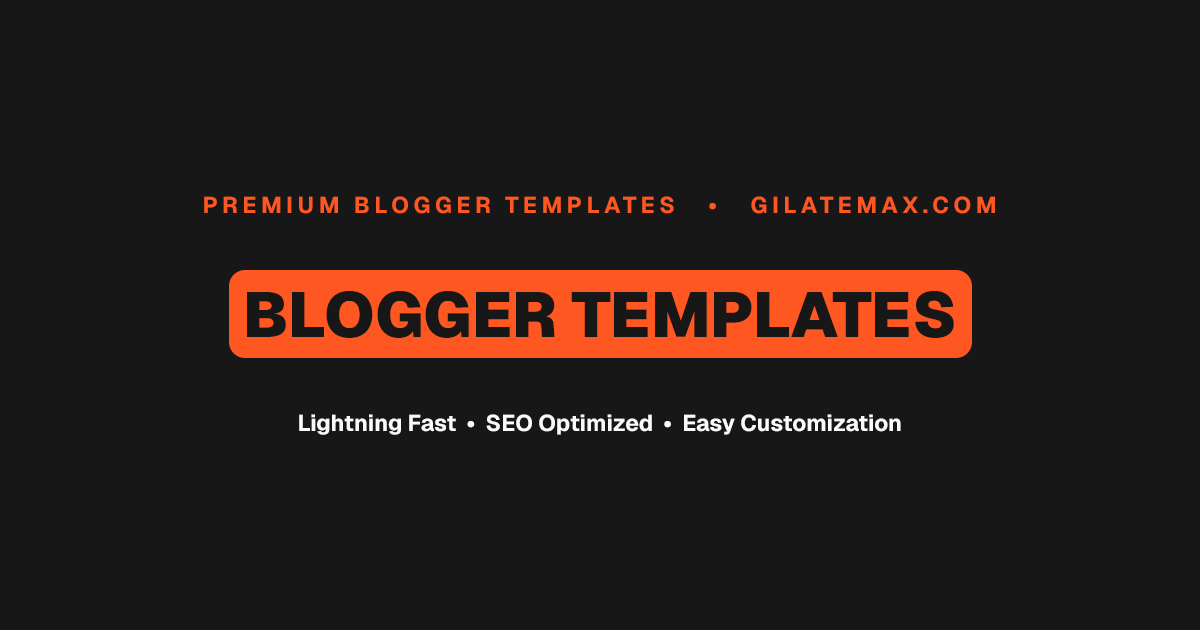
<style>
.page{position:relative;width:1200px;height:630px;background:#171717}
.page>*{position:absolute;margin:0}
.t1{font:22.8px "Geist-Bold";letter-spacing:0.2em;color:#ff5722}
.t2{font:63.5px "Geist-Black";color:#171717}
.t3{font:22.8px "Geist-Bold";color:#fafafa}
</style>
<div class="page">
<p class="t1" style="left:204px;top:196px;width:791px;height:18px">PREMIUM BLOGGER TEMPLATES   •   GILATEMAX.COM</p>
<p class="t2" style="left:247px;top:291px;width:707px;height:47px">BLOGGER TEMPLATES</p>
<p class="t3" style="left:299px;top:414px;width:602px;height:21px">Lightning Fast  •  SEO Optimized  •  Easy Customization</p>
</div>
